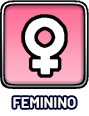
<style>
.page{position:relative;width:89px;height:116px;background:#ffffff}
.page>*{position:absolute;margin:0}
.t1{font:14.7px "Barlow-Bold";color:#ffffff}
</style>
<div class="page">
<p class="t1" style="left:13px;top:97px;width:63px;height:11px">FEMININO</p>
</div>
